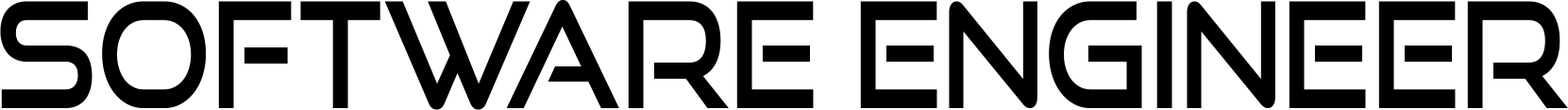
<style>
.page{position:relative;width:1568px;height:110px;background:#ffffff}
.page>*{position:absolute;margin:0}
.t1{font:146.7px "GoodTimesRg-Regular";color:#000000;scale:0.8 1}
</style>
<div class="page">
<p class="t1" style="left:0px;top:0px;width:1568px;height:110px">SOFTWARE ENGINEER</p>
</div>
